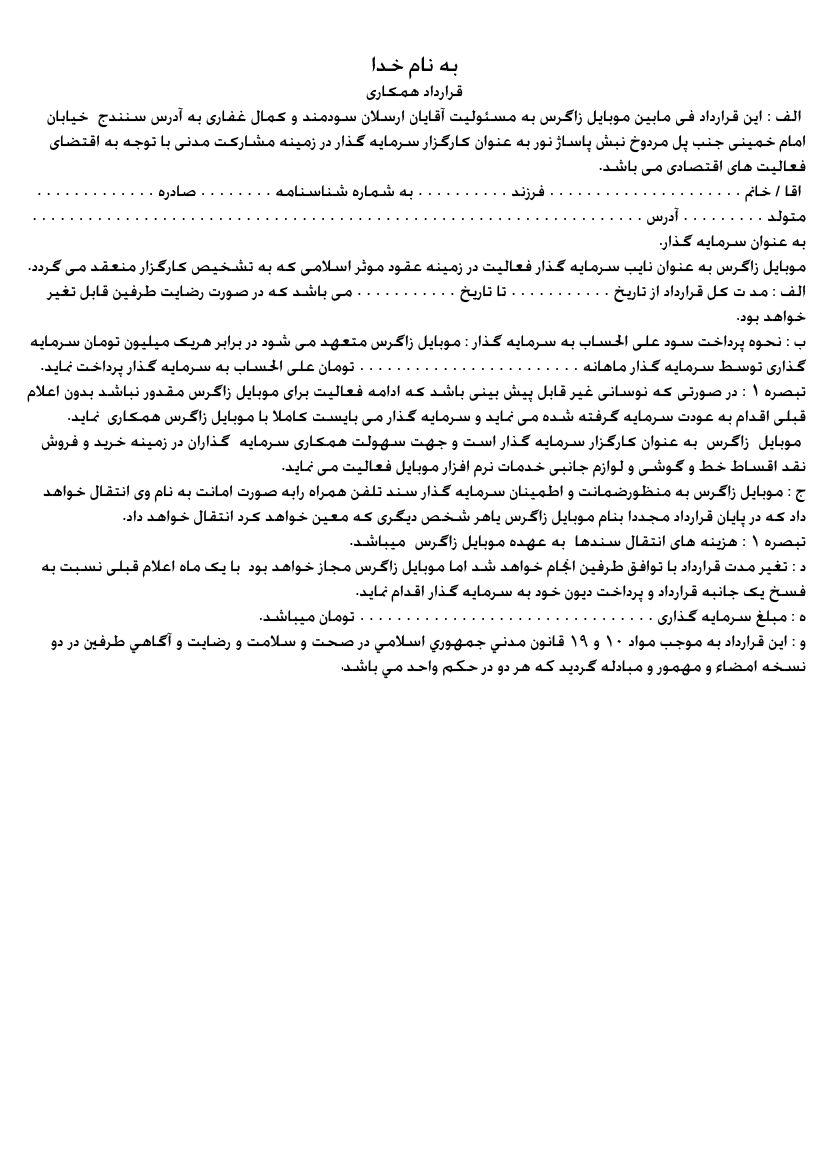
<style>
.page{position:relative;width:827px;height:1169px;background:#ffffff}
.page>*{position:absolute;margin:0}
.t1{font:20.8px "Anhedonia";color:#000000}
.t2{font:27.8px "Anhedonia";color:#000000}
.t3{font:20.8px "Andalus";color:#000000}
.t4{font:20.8px "BYagutBold";color:#000000}
.t5{font:20.8px "BYagut";color:#000000}
</style>
<div class="page">
<p class="t1" style="left:27px;top:56px;width:780px;height:623px;text-align:center"><span class="t2">به نام خدا<br></span>قرارداد همکاری<br> الف : این قرارداد فی مابین موبایل زاگرس به مسئولیت آقایان ارسلان سودمند و کمال غفاری به آدرس سنندج  خیابان امام خمینی جنب پل مردوخ نبش پاساژ نور به عنوان کارگزار سرمایه گذار در زمینه مشارکت مدنی با توجه به اقتضای فعالیت های اقتصادی می باشد<span class="t3">.<br></span> اقا / خانم<span class="t3"> . . . . . . . . . . . . . . . . . . . . . </span>فرزند<span class="t3"> . . . . . . . . . . </span>به شماره شناسنامه<span class="t3"> . . . . . . . . </span>صادره<span class="t3"> . . . . . . . . . . . . .<br></span>متولد<span class="t3"> . . . . . . . . . </span>آدرس<span class="t3"> . . . . . . . . . . . . . . . . . . . . . . . . . . . . . . . . . . . . . . . . . . . . . . . . . . . . . . . . . . . . . . . . . . </span>به عنوان سرمایه گذار<span class="t3">.<br></span>موبایل زاگرس به عنوان نایب سرمایه گذار فعالیت در زمینه عقود موثر اسلامی که به تشخیص کارگزار منعقد می گردد<span class="t3">.<br></span>الف : مد ت کل قرارداد از تاریخ<span class="t3"> . . . . . . . . . . . </span>تا تاریخ<span class="t3"> . . . . . . . . . . . </span>می باشد که در صورت رضایت طرفین قابل تغیر خواهد بود<span class="t3">.<br></span>ب : نحوه پرداخت سود علی الحساب به سرمایه گذار : موبایل زاگرس متعهد می شود در برابر هریک میلیون تومان سرمایه گذاری توسط سرمایه گذار ماهانه<span class="t3"> . . . . . . . . . . . . . . . . . . . . . . . . </span>تومان علی الحساب به سرمایه گذار پرداخت نماید<span class="t3">.<br></span>تبصره <span class="t4">1</span> : در صورتی که نوسانی غیر قابل پیش بینی باشد که ادامه فعالیت برای موبایل زاگرس مقدور نباشد بدون اعلام قبلی اقدام به عودت سرمایه گرفته شده می نماید و سرمایه گذار می بایست کاملا با موبایل زاگرس همکاری  نماید<span class="t3">.<br></span> موبایل  زاگرس  به عنوان کارگزار سرمایه گذار است و جهت سهولت همکاری سرمایه  گذاران در زمینه خرید و فروش نقد اقساط خط و گوشی و لوازم جانبی خدمات نرم افزار موبایل فعالیت می نماید<span class="t3">.<br></span>ج : موبایل زاگرس به منظورضمانت و اطمینان سرمایه گذار سند تلفن همراه رابه صورت امانت به نام وی انتقال خواهد داد که در پایان قرارداد مجددا بنام موبایل زاگرس یاهر شخص دیگری که معین خواهد کرد انتقال خواهد داد<span class="t3">.<br></span>تبصره <span class="t5">1</span> : هزینه های انتقال سندها  به عهده موبایل زاگرس  میباشد<span class="t3">.<br></span>د : تغیر مدت قرارداد با توافق طرفین انجام خواهد شد اما موبایل زاگرس مجاز خواهد بود  با یک ماه اعلام قبلی نسبت به فسخ یک جانبه قرارداد و پرداخت دیون خود به سرمایه گذار اقدام نماید<span class="t3">.<br></span>ه : مبلغ سرمایه گذاری<span class="t3"> . . . . . . . . . . . . . . . . . . . . . . . . . . . . . . . . </span>تومان میباشد<span class="t3">.<br></span>و : اين قرارداد به موجب مواد <span class="t5">10</span> و <span class="t5">19</span> قانون مدني جمهوري اسلامي در صحت و سلامت و رضايت و آگاهي طرفين در دو نسخه امضاء و مهمور و مبادله گرديد كه هر دو در حكم واحد مي باشد.</p>
</div>
